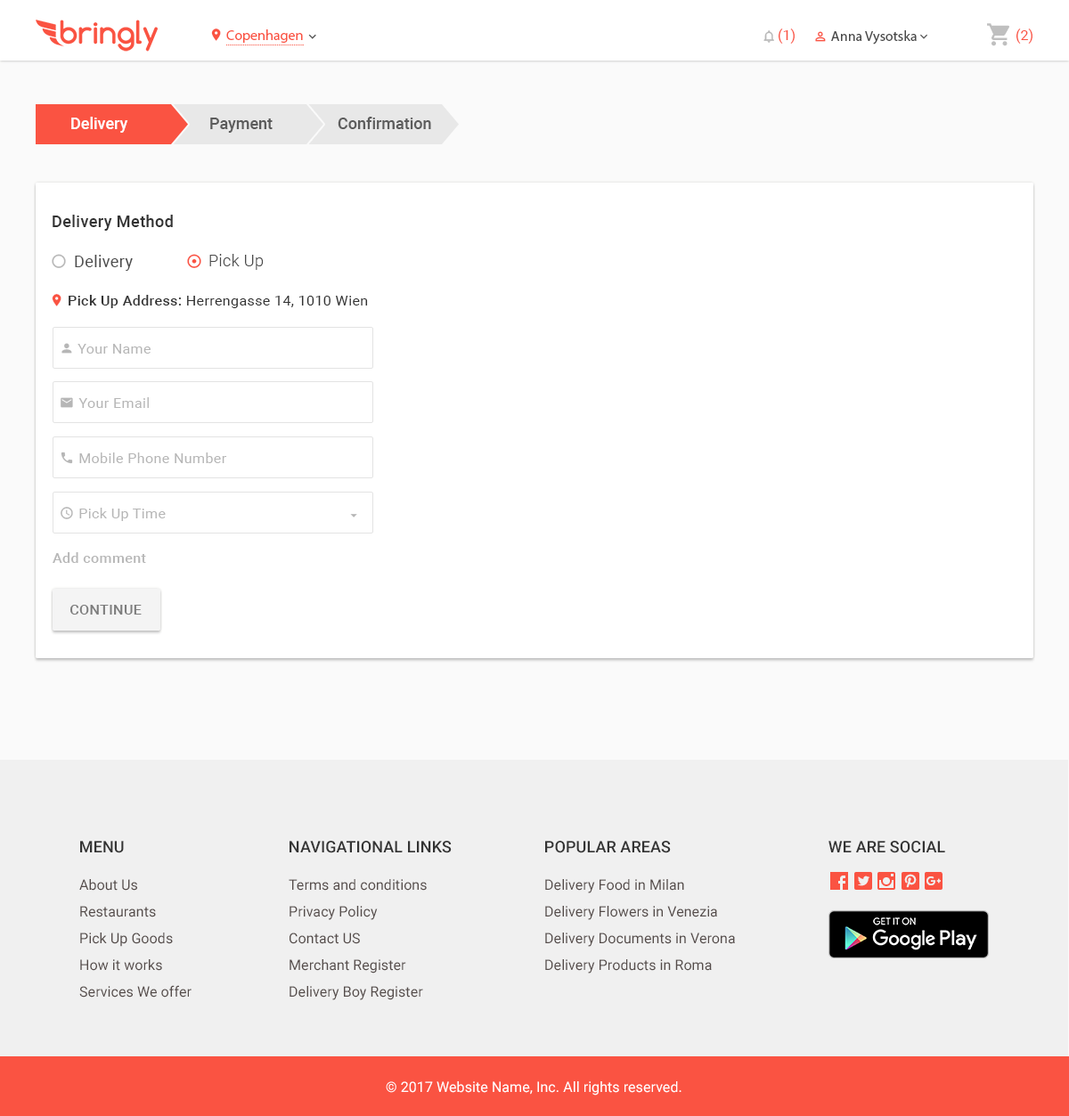
<style>
.page{position:relative;width:1069px;height:1116px;background:#ffffff}
.page>*{position:absolute;margin:0}
.t1{font:14.2px "MyriadPro-Regular";color:#fa5342}
.t2{font:14.2px "Roboto-Regular";color:#fa5342}
.t3{font:14.2px "MyriadPro-Regular";color:#4a4a4a}
.t4{font:16px "Roboto-Medium";color:#fffefe}
.t5{font:16px "Roboto-Medium";color:#5c5c5c}
.t6{font:16px "Roboto-Medium";letter-spacing:0.025em;color:#333333}
.t7{font:16px "Roboto-Regular";letter-spacing:0.025em;color:#4a4a4a}
.t8{font:16px "Roboto-Light";letter-spacing:0.025em;color:#4a4a4a}
.t9{font:14.2px "Roboto-Regular";letter-spacing:0.025em;color:#333333}
.t10{font:14.2px "Roboto-Medium";letter-spacing:0.025em;color:#333333}
.t11{font:14.2px "Roboto-Regular";letter-spacing:0.025em;color:#b6b6b6}
.t12{font:14.2px "Roboto-Medium";letter-spacing:0.025em;color:#b8b8b8}
.t13{font:14.2px "Roboto-Medium";letter-spacing:0.025em;color:#7d7d7d;text-transform:uppercase}
.t14{font:16px "Roboto-Medium";letter-spacing:0.005em;color:#333333}
.t15{font:16px "Roboto-Medium";letter-spacing:0.005em;color:#333333;text-transform:uppercase}
.t16{font:14.2px/26.7px "Roboto-Regular";letter-spacing:0.005em;color:#554c4a}
.t17{font:14.2px "Roboto-Regular";letter-spacing:0.005em;color:#ffffff}
</style>
<div class="page">
<p class="t1" style="left:226px;top:29px;width:77px;height:14px">Copenhagen</p>
<p class="t2" style="left:777px;top:28px;width:17px;height:16px">(1)</p>
<p class="t2" style="left:1015px;top:28px;width:17px;height:16px">(2)</p>
<p class="t3" style="left:831px;top:30px;width:85px;height:15px">Anna Vysotska</p>
<p class="t4" style="left:71px;top:117px;width:57px;height:16px">Delivery</p>
<p class="t5" style="left:210px;top:118px;width:63px;height:15px">Payment</p>
<p class="t5" style="left:338px;top:117px;width:93px;height:12px">Confirmation</p>
<p class="t6" style="left:53px;top:215px;width:120px;height:16px">Delivery Method</p>
<p class="t7" style="left:75px;top:255px;width:58px;height:16px">Delivery</p>
<p class="t8" style="left:209px;top:254px;width:55px;height:16px">Pick Up</p>
<p class="t9" style="left:69px;top:295px;width:299px;height:13px"><span class="t10">Pick Up Address: </span>Herrengasse 14, 1010 Wien</p>
<p class="t11" style="left:77px;top:344px;width:74px;height:10px">Your Name</p>
<p class="t11" style="left:78px;top:397px;width:71px;height:11px">Your Email</p>
<p class="t11" style="left:79px;top:452px;width:148px;height:11px">Mobile Phone Number</p>
<p class="t11" style="left:79px;top:508px;width:87px;height:13px">Pick Up Time</p>
<p class="t12" style="left:53px;top:552px;width:93px;height:11px">Add comment</p>
<p class="t13" style="left:69px;top:605px;width:73px;height:9px">COntinue</p>
<p class="t14" style="left:80px;top:841px;width:44px;height:12px">MENU</p>
<p class="t15" style="left:289px;top:841px;width:163px;height:12px">Navigational Links</p>
<p class="t15" style="left:545px;top:841px;width:126px;height:12px">Popular Areas</p>
<p class="t15" style="left:828px;top:841px;width:117px;height:12px">We are social</p>
<p class="t16" style="left:79px;top:879px;width:112px;height:118px">About Us<br>Restaurants<br>Pick Up Goods <br>How it works <br>Services We offer</p>
<p class="t16" style="left:289px;top:879px;width:138px;height:121px">Terms and conditions<br>Privacy Policy<br>Contact US <br>Merchant Register <br>Delivery Boy Register</p>
<p class="t16" style="left:545px;top:879px;width:190px;height:94px">Delivery Food in Milan<br>Delivery Flowers in Venezia<br>Delivery Documents in Verona<br>Delivery Products in Roma</p>
<p class="t17" style="left:386px;top:1081px;width:295px;height:14px">© 2017 Website Name, Inc. All rights reserved.</p>
</div>
